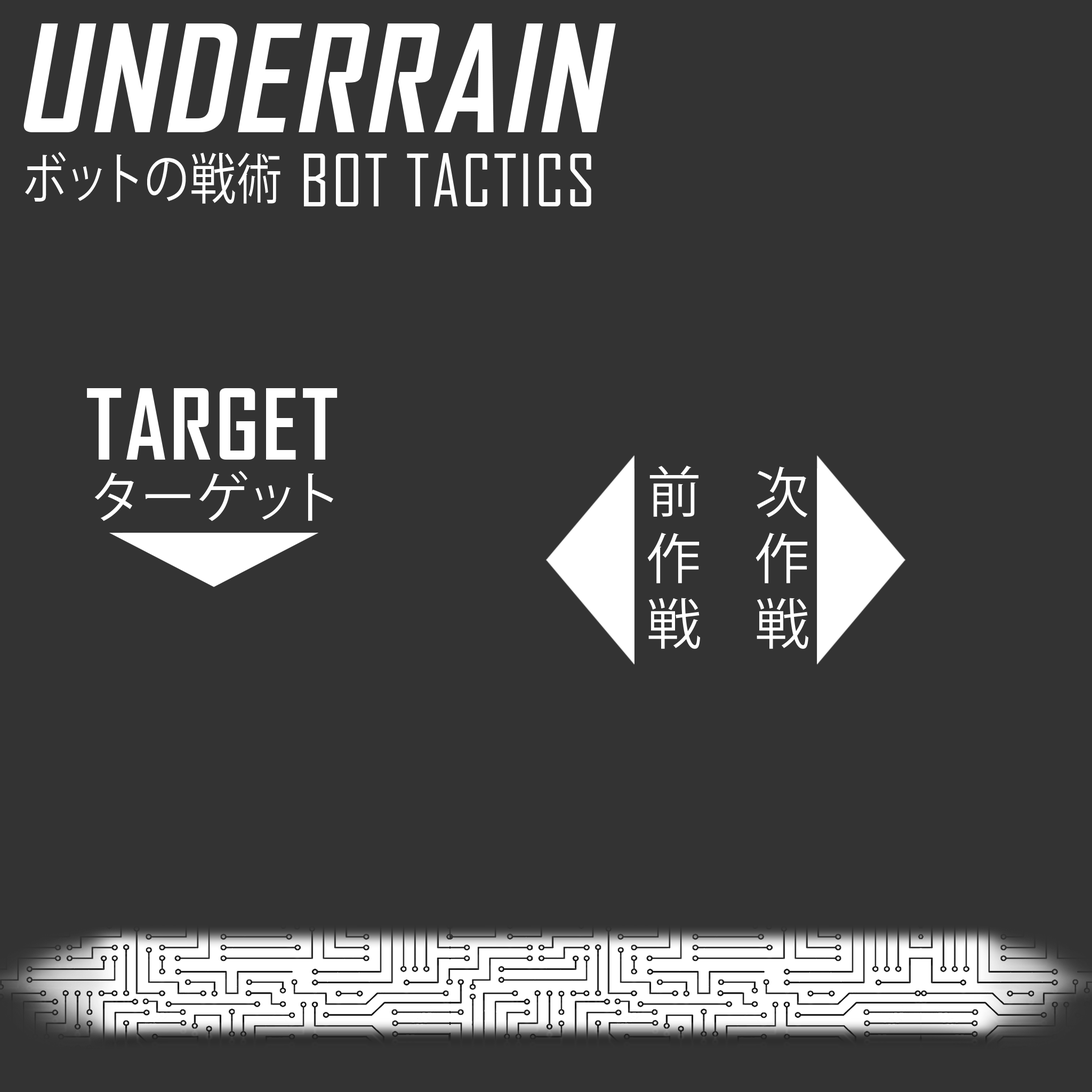
<style>
.page{position:relative;width:1092px;height:1092px;background:#333333}
.page>*{position:absolute;margin:0}
.t1{font:142.5px "AgencyFB-Bold";letter-spacing:0.03em;color:#ffffff;font-style:italic}
.t2{font:54.6px "KozGoPr6N-Regular";letter-spacing:0.03em;color:#ffffff;scale:0.82 1}
.t3{font:69.4px "AgencyFB-Reg";letter-spacing:0.03em;color:#fefefe}
.t4{font:93.2px "AgencyFB-Bold";letter-spacing:0.03em;color:#ffffff}
.t5{font:54.6px "KozGoPr6N-Regular";letter-spacing:0.03em;color:#ffffff}
</style>
<div class="page">
<p class="t1" style="left:23px;top:23px;width:593px;height:109px">UNDERRAIN</p>
<p class="t2" style="left:25px;top:151px;width:255px;height:53px">ボットの戦術</p>
<p class="t3" style="left:303px;top:153px;width:288px;height:53px">BOT TACTICS</p>
<p class="t4" style="left:87px;top:388px;width:251px;height:72px">TARGET</p>
<p class="t5" style="left:94px;top:470px;width:239px;height:51px">ターゲット</p>
<p class="t5" style="left:649px;top:465px;width:49px;height:52px">前</p>
<p class="t5" style="left:757px;top:467px;width:51px;height:51px">次</p>
<p class="t5" style="left:647px;top:533px;width:53px;height:50px">作</p>
<p class="t5" style="left:756px;top:533px;width:52px;height:50px">作</p>
<p class="t5" style="left:648px;top:598px;width:52px;height:51px">戰</p>
<p class="t5" style="left:757px;top:598px;width:51px;height:51px">戰</p>
</div>
